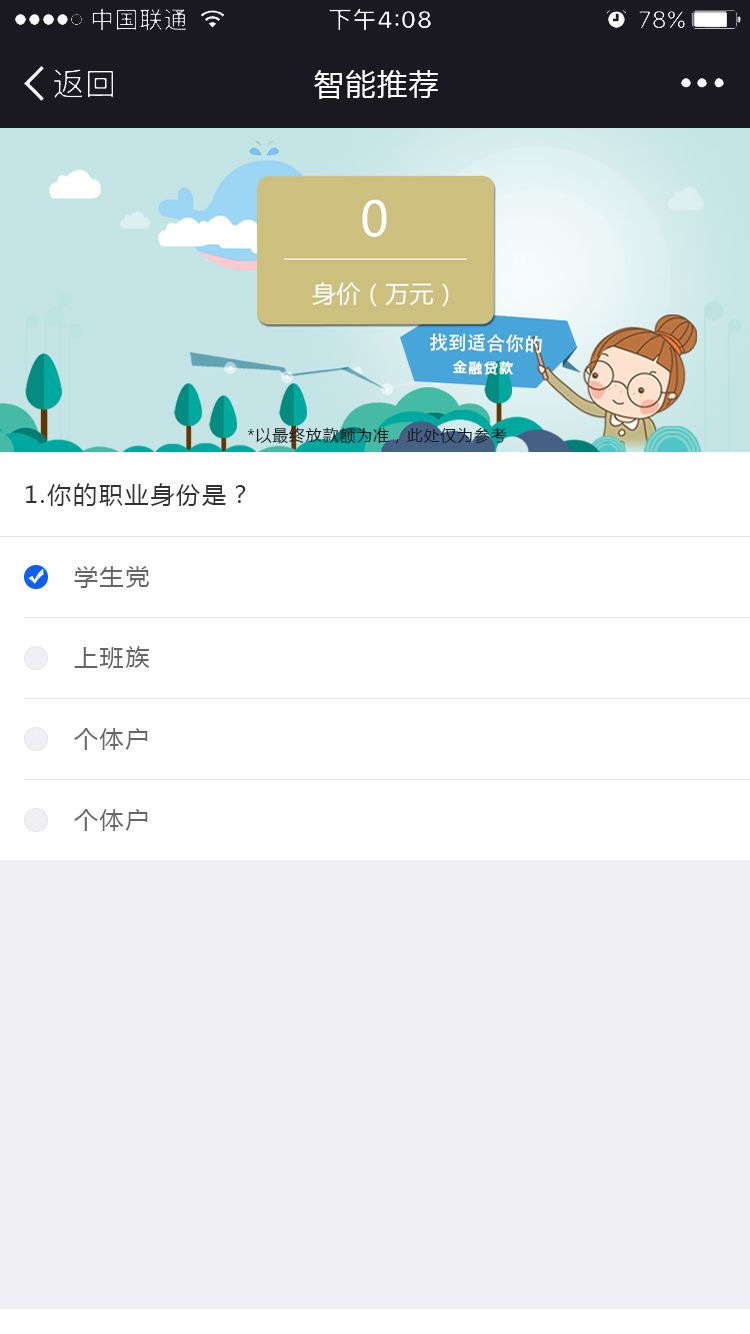
<style>
.page{position:relative;width:750px;height:1334px;background:#efeff4}
.page>*{position:absolute;margin:0}
.t1{font:30px "MicrosoftYaHei";letter-spacing:0.05em;color:#fffefe}
.t2{font:16px "MicrosoftYaHei";letter-spacing:0.05em;color:#1a1b1d}
.t3{font:24px "MicrosoftYaHei";letter-spacing:0.075em;color:#333333}
.t4{font:24px "MicrosoftYaHei";letter-spacing:0.075em;color:#666666}
</style>
<div class="page">
<p class="t1" style="left:314px;top:70px;width:124px;height:29px">智能推荐</p>
<p class="t2" style="left:248px;top:427px;width:259px;height:17px">*以最终放款额为准，此处仅为参考</p>
<p class="t3" style="left:26px;top:483px;width:220px;height:23px">1.你的职业身份是？</p>
<p class="t4" style="left:74px;top:566px;width:76px;height:22px">学生党</p>
<p class="t4" style="left:74px;top:646px;width:76px;height:23px">上班族</p>
<p class="t4" style="left:74px;top:728px;width:74px;height:22px">个体户</p>
<p class="t4" style="left:74px;top:809px;width:74px;height:22px">个体户</p>
</div>
